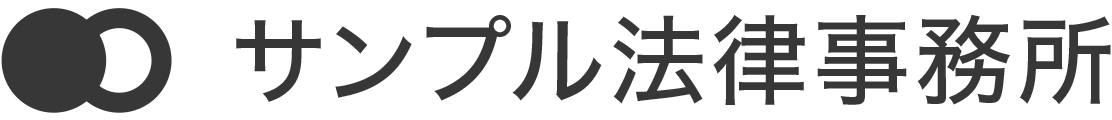
<style>
.page{position:relative;width:1112px;height:120px;background:#ffffff}
.page>*{position:absolute;margin:0}
.t1{font:97.1px "HiraginoSans-W5";letter-spacing:0.05em;color:#373737}
</style>
<div class="page">
<p class="t1" style="left:236px;top:14px;width:875px;height:91px">サンプル法律事務所</p>
</div>
